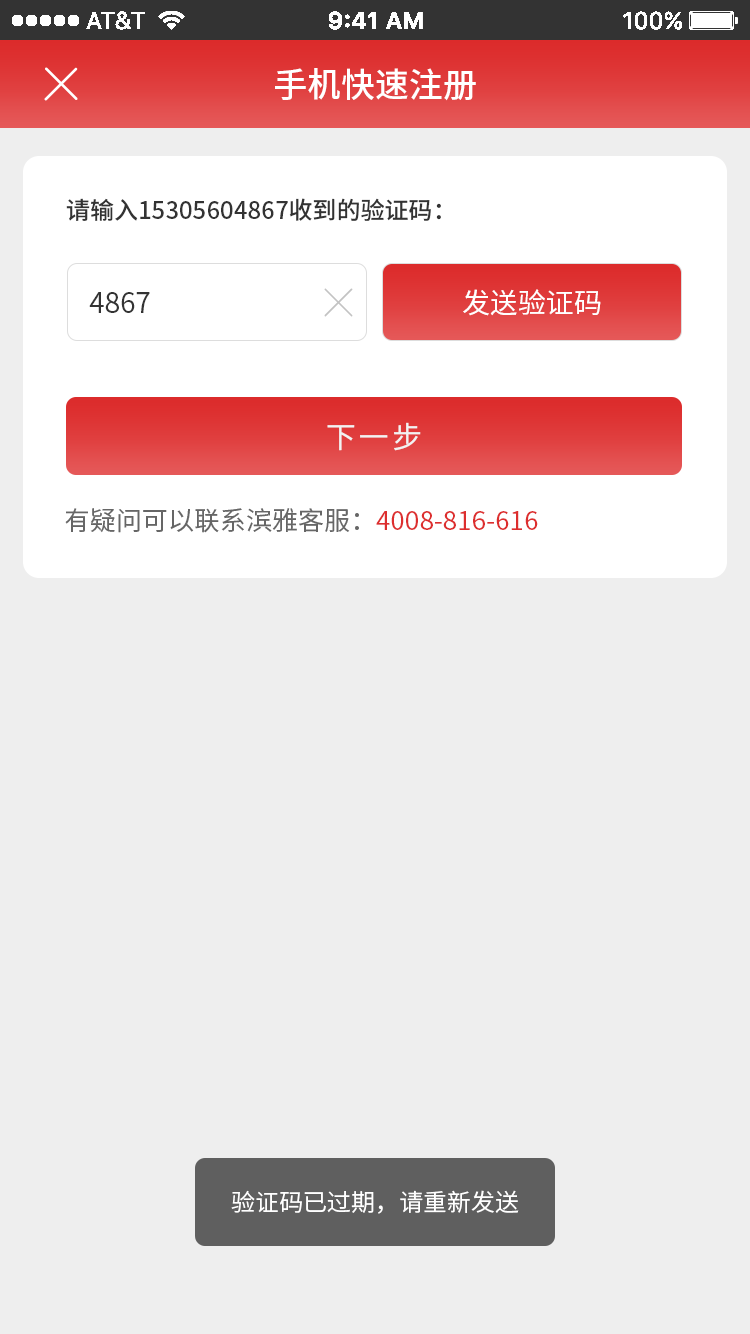
<style>
.page{position:relative;width:750px;height:1334px;background:#eeeeee}
.page>*{position:absolute;margin:0}
.t1{font:34px "SourceHanSansCN-Medium";color:#ffffff}
.t2{font:24px "SourceHanSansCN-Medium";color:#333333}
.t3{font:28px "SourceHanSansCN-Regular";color:#333333}
.t4{font:28px "SourceHanSansCN-Regular";color:#ffffff}
.t5{font:30px "SourceHanSansCN-Regular";letter-spacing:0.1em;color:#f2f2f2}
.t6{font:26px "SourceHanSansCN-Regular";color:#666666}
.t7{font:26px "SourceHanSansCN-Regular";color:#dd2e2e}
.t8{font:24px "SourceHanSansCN-Normal";color:#ffffff}
</style>
<div class="page">
<p class="t1" style="left:275px;top:68px;width:201px;height:33px">手机快速注册</p>
<p class="t2" style="left:66px;top:198px;width:375px;height:23px">请输入15305604867收到的验证码：</p>
<p class="t3" style="left:89px;top:292px;width:61px;height:21px">4867</p>
<p class="t4" style="left:463px;top:289px;width:138px;height:27px">发送验证码</p>
<p class="t5" style="left:327px;top:422px;width:94px;height:29px">下一步</p>
<p class="t6" style="left:65px;top:508px;width:473px;height:25px">有疑问可以联系滨雅客服：<span class="t7">4008-816-616</span></p>
<p class="t8" style="left:231px;top:1190px;width:288px;height:24px">验证码已过期，请重新发送</p>
</div>
